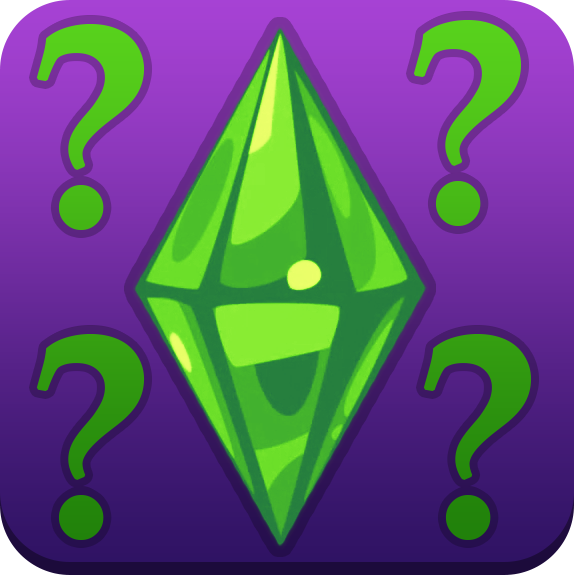
<style>
.page{position:relative;width:574px;height:575px}
.page>*{position:absolute;margin:0}
.t1{font:292.2px "PalatinoLinotype-Bold";color:#54cb1a}
.t2{font:292.2px "PalatinoLinotype-Bold";color:#54cb1b}
.t3{font:292.2px "PalatinoLinotype-Bold";color:#3ca913}
.t4{font:292.2px "PalatinoLinotype-Bold";color:#3ba813}
</style>
<div class="page">
<p class="t1" style="left:36px;top:24px;width:109px;height:206px">?</p>
<p class="t2" style="left:413px;top:20px;width:109px;height:206px">?</p>
<p class="t3" style="left:36px;top:334px;width:109px;height:206px">?</p>
<p class="t4" style="left:423px;top:334px;width:109px;height:206px">?</p>
</div>
